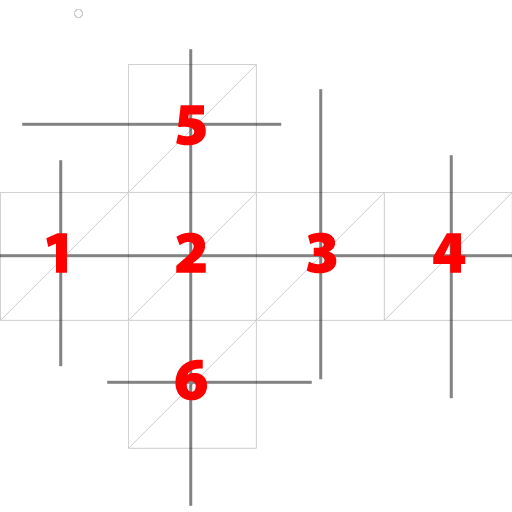
<style>
.page{position:relative;width:512px;height:512px;background:#ffffff}
.page>*{position:absolute;margin:0}
.t1{font:60px "MyriadPro-Black";letter-spacing:-0.1em;color:#ff0000;text-transform:uppercase;font-weight:bold}
</style>
<div class="page">
<p class="t1" style="left:176px;top:105px;width:30px;height:41px">5</p>
<p class="t1" style="left:46px;top:233px;width:21px;height:40px">1</p>
<p class="t1" style="left:176px;top:232px;width:30px;height:41px">2</p>
<p class="t1" style="left:306px;top:232px;width:31px;height:42px">3</p>
<p class="t1" style="left:433px;top:233px;width:33px;height:40px">4</p>
<p class="t1" style="left:175px;top:359px;width:32px;height:42px">6</p>
</div>
